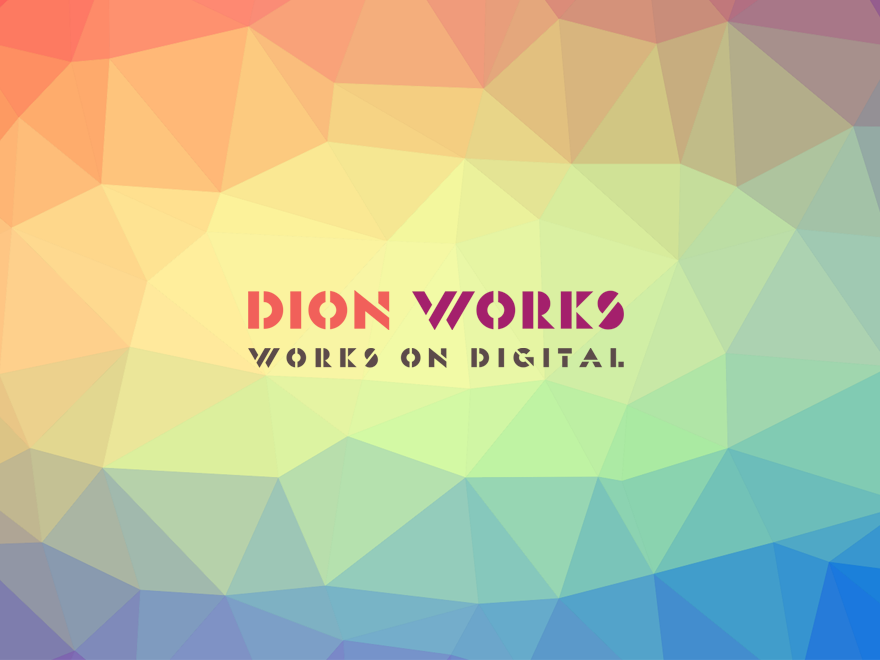
<style>
.page{position:relative;width:880px;height:660px}
.page>*{position:absolute;margin:0}
.t1{font:53.8px "State-CleanStencil";font-weight:bold}
.t2{font:27.3px "State-CleanStencil";letter-spacing:0.21em;color:#483b44;font-weight:bold}
</style>
<div class="page">
<p class="t1" style="left:248px;top:290px;width:376px;height:40px">DIoN WoRKS</p>
<p class="t2" style="left:248px;top:348px;width:376px;height:20px">Works oN DIGITAL</p>
</div>
